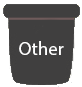
<style>
.page{position:relative;width:82px;height:87px;background:#403f3f}
.page>*{position:absolute;margin:0}
.t1{font:18.7px "MyriadPro-Regular";color:#ffffff}
</style>
<div class="page">
<p class="t1" style="left:19px;top:41px;width:45px;height:14px">Other</p>
</div>
